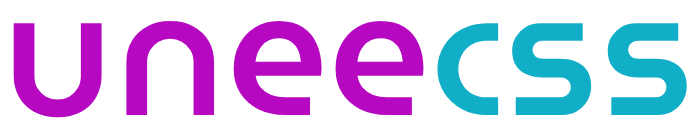
<style>
.page{position:relative;width:700px;height:140px;background:#ffffff}
.page>*{position:absolute;margin:0}
.t1{font:180px "MuseoModerno-Medium";color:#b607c1}
.t2{font:180px "MuseoModerno-Medium";color:#10afc7}
</style>
<div class="page">
<p class="t1" style="left:13px;top:21px;width:674px;height:97px">unee<span class="t2">css</span></p>
</div>
